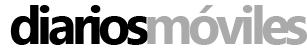
<style>
.page{position:relative;width:307px;height:48px;background:#ffffff}
.page>*{position:absolute;margin:0}
.t1{font:53.2px "SegoeUI-Bold";letter-spacing:-0.09em;color:#000000}
.t2{font:53.2px "SegoeUI-Bold";letter-spacing:-0.09em;color:#aaaaaa}
</style>
<div class="page">
<p class="t1" style="left:10px;top:5px;width:138px;height:40px">diarios</p>
<p class="t2" style="left:147px;top:5px;width:160px;height:40px">móviles</p>
</div>
